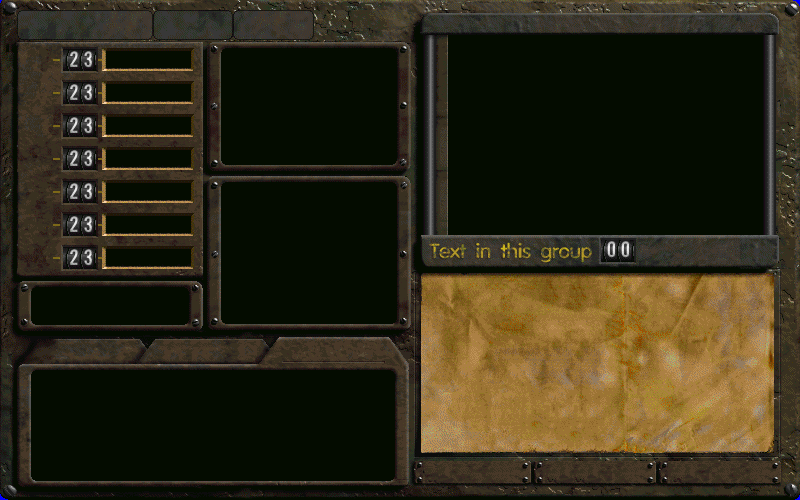
<style>
.page{position:relative;width:800px;height:500px;background:#040c00}
.page>*{position:absolute;margin:0}
.t1{font:19.8px "18VAGRoundedMNormal"}
</style>
<div class="page">
<p class="t1" style="left:429px;top:242px;width:163px;height:21px">Text in this group</p>
</div>
